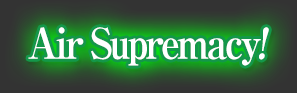
<style>
.page{position:relative;width:297px;height:93px}
.page>*{position:absolute;margin:0}
.t1{font:42px "RyuminPro-ExBold";letter-spacing:-0.08em;color:#ffffff;scale:0.9 1}
.t2{font:42px "RyuminPro-ExBold";letter-spacing:-0.08em;color:#ffffff;font-style:italic;scale:0.9 1}
</style>
<div class="page">
<p class="t1" style="left:28px;top:27px;width:241px;height:39px">Air Supremacy<span class="t2">!</span></p>
</div>
